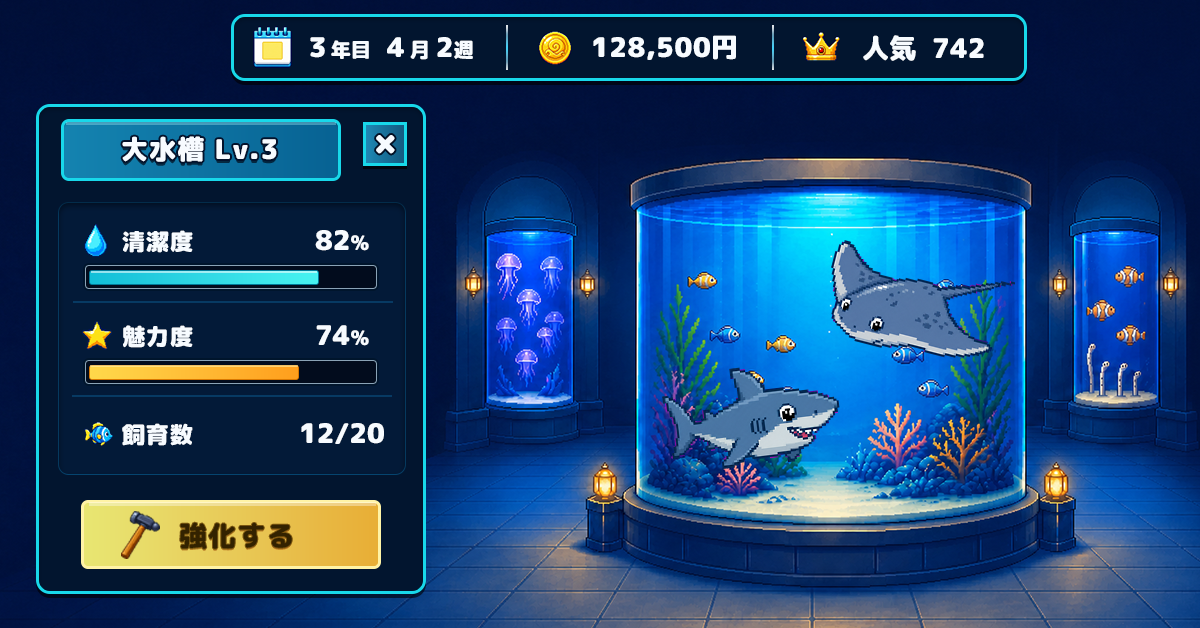
<style>
.page{position:relative;width:1200px;height:628px}
.page>*{position:absolute;margin:0}
.t1{font:20px "RoundedMplus1c-Black";color:#f7fbff}
.t2{font:27px "RoundedMplus1c-Black";color:#f7fbff}
.t3{font:27px "RoundedMplus1c-Black";letter-spacing:0.02em;color:#f7fbff}
.t4{font:27px "RoundedMplus1c-Black";letter-spacing:0.04em;color:#f7fbff}
.t5{font:34px "RoundedMplus1c-Black";color:#f7fbff}
.t6{font:23px "RoundedMplus1c-Black";letter-spacing:0.04em;color:#f7fbff}
.t7{font:28px "RoundedMplus1c-ExtraBold";letter-spacing:0.04em;color:#332200}
</style>
<div class="page">
<p class="t1" style="left:310px;top:37px;width:163px;height:23px"><span class="t2">３</span>年目  <span class="t2">４</span>月 <span class="t2">2</span>週</p>
<p class="t3" style="left:593px;top:35px;width:143px;height:25px">128,500円</p>
<p class="t2" style="left:863px;top:35px;width:121px;height:26px">人気  742</p>
<p class="t4" style="left:122px;top:136px;width:155px;height:26px">大水槽 Lv.3</p>
<p class="t5" style="left:376px;top:135px;width:19px;height:19px">×</p>
<p class="t6" style="left:122px;top:230px;width:71px;height:23px">清潔度</p>
<p class="t2" style="left:315px;top:230px;width:54px;height:21px">82<span class="t1">%</span></p>
<p class="t6" style="left:123px;top:325px;width:70px;height:23px">魅力度</p>
<p class="t2" style="left:316px;top:325px;width:53px;height:21px">74<span class="t1">%</span></p>
<p class="t6" style="left:122px;top:423px;width:71px;height:23px">飼育数</p>
<p class="t2" style="left:301px;top:423px;width:83px;height:21px">12/20</p>
<p class="t7" style="left:180px;top:522px;width:112px;height:27px">強化する</p>
</div>
